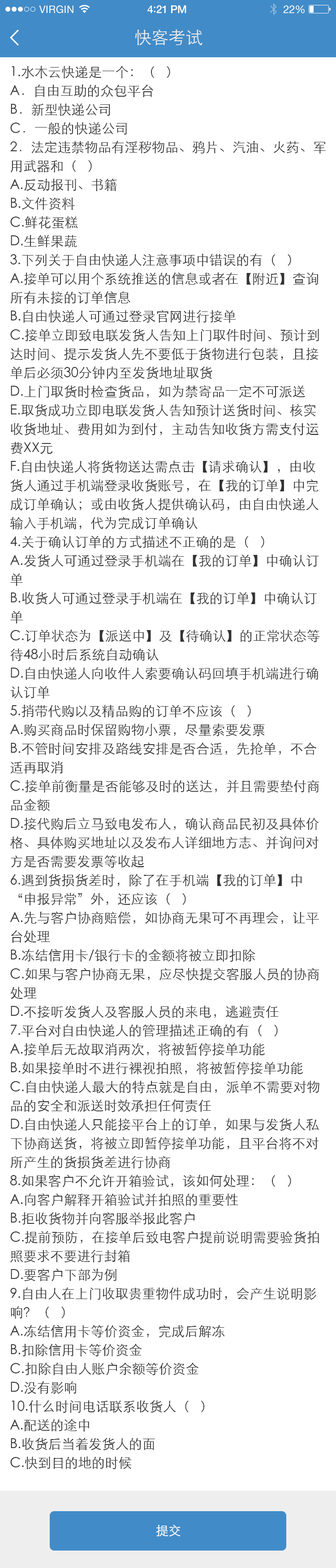
<style>
.page{position:relative;width:336px;height:1568px;background:#ffffff}
.page>*{position:absolute;margin:0}
.t1{font:10.3px "HelveticaNeue";letter-spacing:0.02em;color:#ffffff}
.t2{font:10.7px "HelveticaNeue-Medium";letter-spacing:-0.02em;color:#ffffff}
.t3{font:11.6px "Avenir-Medium";letter-spacing:-0.02em;color:#ffffff}
.t4{font:10.7px "HelveticaNeue";letter-spacing:-0.02em;color:#ffffff}
.t5{font:17px "STXihei";color:#eeeeee}
.t6{font:13.4px/18.8px "STXihei";color:#333333}
.t7{font:12.5px "STXihei";color:#ffffff}
</style>
<div class="page">
<p class="t1" style="left:39px;top:5px;width:34px;height:8px">VIRGIN</p>
<p class="t2" style="left:147px;top:5px;width:39px;height:8px">4<span class="t3">:</span>21 PM</p>
<p class="t4" style="left:283px;top:5px;width:21px;height:8px">22%</p>
<p class="t5" style="left:135px;top:30px;width:67px;height:15px">快客考试</p>
<p class="t6" style="left:10px;top:66px;width:315px;height:1403px">1.水木云快递是一个：（   ）<br>A．自由互助的众包平台     <br>B．新型快递公司      <br>C．一般的快递公司<br>2．法定违禁物品有淫秽物品、鸦片、汽油、火药、军用武器和（   ）<br>A.反动报刊、书籍    <br>B.文件资料     <br>C.鲜花蛋糕      <br>D.生鲜果蔬<br>3.下列关于自由快递人注意事项中错误的有（   ）<br>A.接单可以用个系统推送的信息或者在【附近】查询所有未接的订单信息<br>B.自由快递人可通过登录官网进行接单         <br>C.接单立即致电联发货人告知上门取件时间、预计到达时间、提示发货人先不要低于货物进行包装，且接单后必须30分钟内至发货地址取货 <br>D.上门取货时检查货品，如为禁寄品一定不可派送<br>E.取货成功立即电联发货人告知预计送货时间、核实收货地址、费用如为到付，主动告知收货方需支付运费XX元<br>F.自由快递人将货物送达需点击【请求确认】，由收货人通过手机端登录收货账号，在【我的订单】中完成订单确认；或由收货人提供确认码，由自由快递人输入手机端，代为完成订单确认<br>4.关于确认订单的方式描述不正确的是（   ）<br>A.发货人可通过登录手机端在【我的订单】中确认订单<br>B.收货人可通过登录手机端在【我的订单】中确认订单   <br>C.订单状态为【派送中】及【待确认】的正常状态等待48小时后系统自动确认<br>D.自由快递人向收件人索要确认码回填手机端进行确认订单<br>5.捎带代购以及精品购的订单不应该（   ）<br>A.购买商品时保留购物小票，尽量索要发票         <br>B.不管时间安排及路线安排是否合适，先抢单，不合适再取消    <br>C.接单前衡量是否能够及时的送达，并且需要垫付商品金额<br>D.接代购后立马致电发布人，确认商品民初及具体价格、具体购买地址以及发布人详细地方志、并询问对方是否需要发票等收起<br>6.遇到货损货差时，除了在手机端【我的订单】中“申报异常”外，还应该（   ）<br>A.先与客户协商赔偿，如协商无果可不再理会，让平台处理<br>B.冻结信用卡/银行卡的金额将被立即扣除<br>C.如果与客户协商无果，应尽快提交客服人员的协商处理<br>D.不接听发货人及客服人员的来电，逃避责任<br>7.平台对自由快递人的管理描述正确的有（   ）<br>A.接单后无故取消两次，将被暂停接单功能<br>B.如果接单时不进行裸视拍照，将被暂停接单功能<br>C.自由快递人最大的特点就是自由，派单不需要对物品的安全和派送时效承担任何责任<br>D.自由快递人只能接平台上的订单，如果与发货人私下协商送货，将被立即暂停接单功能，且平台将不对所产生的货损货差进行协商<br>8.如果客户不允许开箱验试，该如何处理：（   ）<br>A.向客户解释开箱验试并拍照的重要性<br>B.拒收货物并向客服举报此客户<br>C.提前预防，在接单后致电客户提前说明需要验货拍照要求不要进行封箱<br>D.要客户下部为例<br>9.自由人在上门收取贵重物件成功时，会产生说明影响？（   ）<br>A.冻结信用卡等价资金，完成后解冻<br>B.扣除信用卡等价资金<br>C.扣除自由人账户余额等价资金<br>D.没有影响<br>10.什么时间电话联系收货人（   ）<br>A.配送的途中<br>B.收货后当着发货人的面<br>C.快到目的地的时候</p>
<p class="t7" style="left:156px;top:1525px;width:24px;height:12px">提交</p>
</div>
